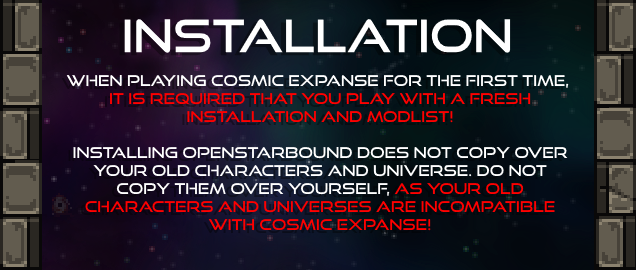
<style>
.page{position:relative;width:636px;height:270px}
.page>*{position:absolute;margin:0}
.t1{font:45px "GoodTimesRg-Regular";color:#ffffff}
.t2{font:15px "GoodTimesRg-Regular";color:#ffffff}
.t3{font:15px "GoodTimesRg-Regular";color:#ff0000}
</style>
<div class="page">
<p class="t1" style="left:124px;top:19px;width:387px;height:34px">installation</p>
<p class="t2" style="left:66px;top:74px;width:503px;height:157px;text-align:center">When playing cosmic expanse for the first time, <br><span class="t3">it is Required that you play with a fresh<br>installation and modlist!<br><br></span>installing Openstarbound does not copy over<br>your old characters and universe. Do not<br>copy them over yourself, <span class="t3">as Your old<br>characters and universes are incompatible<br>with cosmic expanse!</span></p>
</div>
